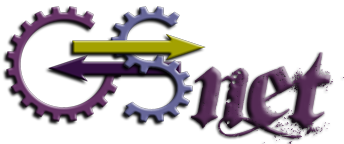
<style>
.page{position:relative;width:344px;height:144px;background:#ffffff}
.page>*{position:absolute;margin:0}
.t1{font:149.4px "Dirt2-SoulStalker";font-style:italic}
</style>
<div class="page">
<p class="t1" style="left:191px;top:52px;width:153px;height:92px">net</p>
</div>
